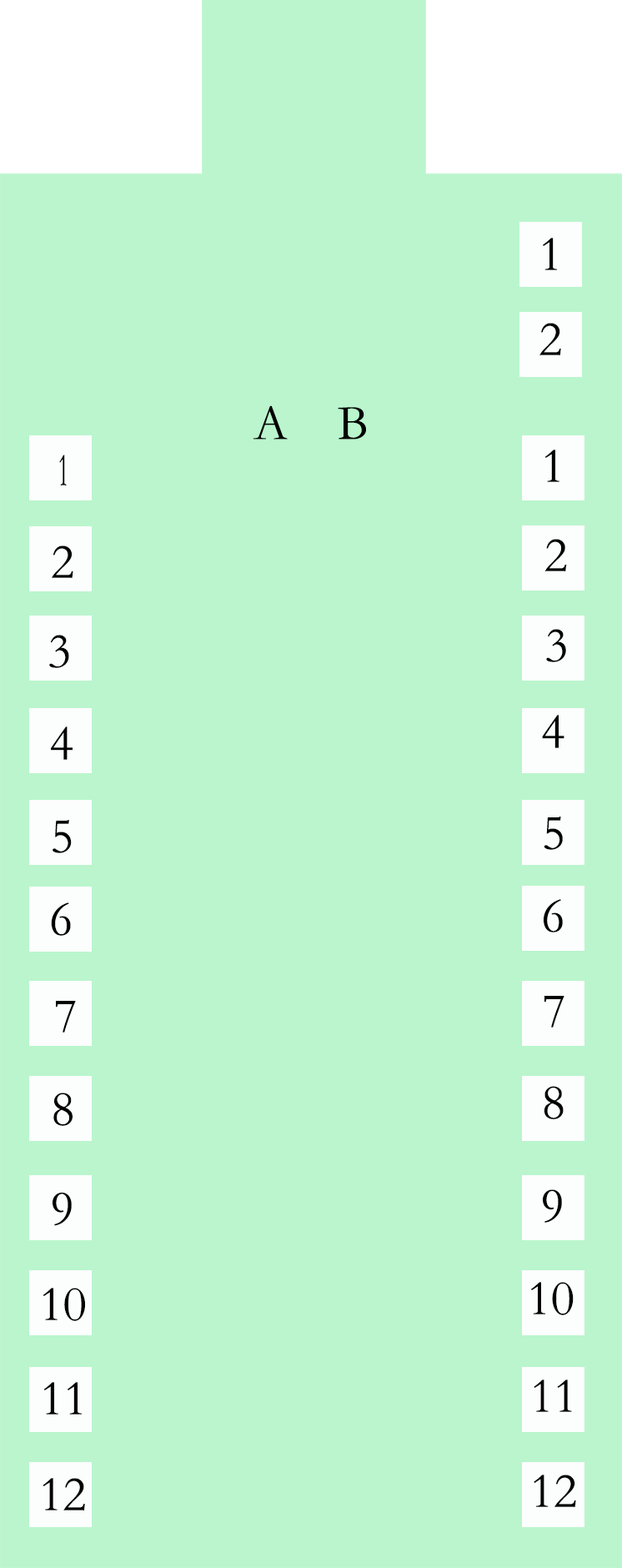
<style>
.page{position:relative;width:622px;height:1568px;background:#baf5cd}
.page>*{position:absolute;margin:0}
.t1{font:50px "STSong";color:#040404}
.t2{font:50px "STSong";color:#000000}
.t3{font:47.3px "STSong";color:#000000;scale:0.49 1}
</style>
<div class="page">
<p class="t1" style="left:543px;top:238px;width:14px;height:32px">1</p>
<p class="t1" style="left:540px;top:323px;width:21px;height:32px">2</p>
<p class="t2" style="left:254px;top:405px;width:112px;height:35px">A    B</p>
<p class="t2" style="left:545px;top:450px;width:15px;height:32px">1</p>
<p class="t3" style="left:59px;top:455px;width:8px;height:30px">1</p>
<p class="t2" style="left:52px;top:545px;width:21px;height:33px">2</p>
<p class="t2" style="left:545px;top:539px;width:22px;height:32px">2</p>
<p class="t2" style="left:546px;top:629px;width:20px;height:33px">3</p>
<p class="t2" style="left:49px;top:635px;width:20px;height:33px">3</p>
<p class="t2" style="left:542px;top:715px;width:23px;height:33px">4</p>
<p class="t2" style="left:51px;top:726px;width:22px;height:34px">4</p>
<p class="t2" style="left:53px;top:820px;width:19px;height:33px">5</p>
<p class="t2" style="left:544px;top:817px;width:19px;height:33px">5</p>
<p class="t2" style="left:51px;top:902px;width:20px;height:34px">6</p>
<p class="t2" style="left:544px;top:899px;width:19px;height:33px">6</p>
<p class="t2" style="left:56px;top:1001px;width:20px;height:32px">7</p>
<p class="t2" style="left:545px;top:996px;width:20px;height:32px">7</p>
<p class="t2" style="left:544px;top:1086px;width:20px;height:33px">8</p>
<p class="t2" style="left:53px;top:1093px;width:20px;height:33px">8</p>
<p class="t2" style="left:53px;top:1192px;width:19px;height:34px">9</p>
<p class="t2" style="left:543px;top:1189px;width:19px;height:34px">9</p>
<p class="t2" style="left:43px;top:1288px;width:42px;height:33px">10</p>
<p class="t2" style="left:531px;top:1282px;width:43px;height:33px">10</p>
<p class="t2" style="left:43px;top:1382px;width:39px;height:33px">11</p>
<p class="t2" style="left:534px;top:1380px;width:38px;height:32px">11</p>
<p class="t2" style="left:43px;top:1478px;width:42px;height:32px">12</p>
<p class="t2" style="left:534px;top:1475px;width:42px;height:32px">12</p>
</div>
